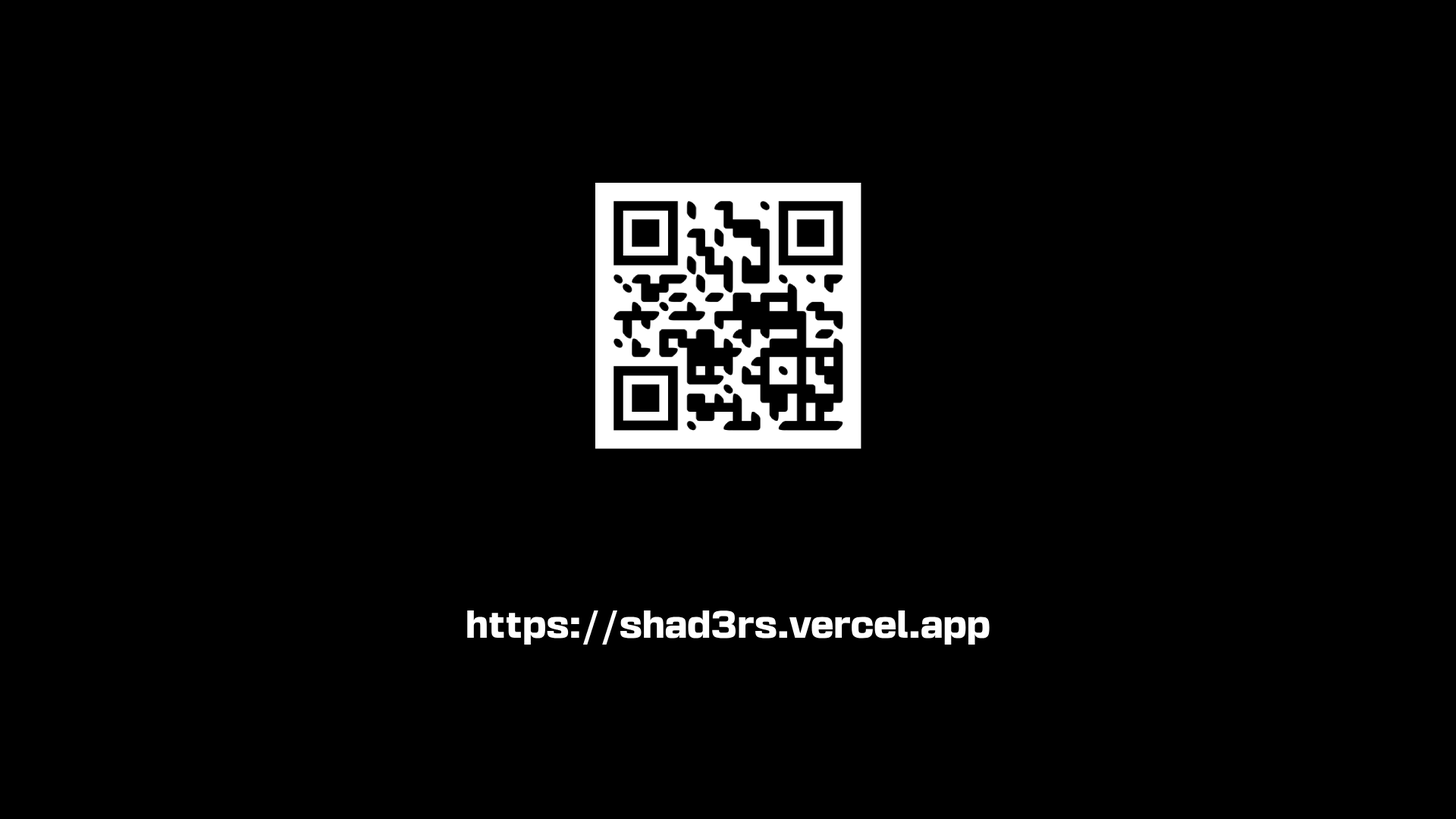
<style>
.page{position:relative;width:1456px;height:819px;background:#000000}
.page>*{position:absolute;margin:0}
.t1{font:34.1px "BasementGrotesque-Black";color:#ffffff}
</style>
<div class="page">
<p class="t1" style="left:467px;top:610px;width:523px;height:35px">https://shad3rs.vercel.app</p>
</div>
